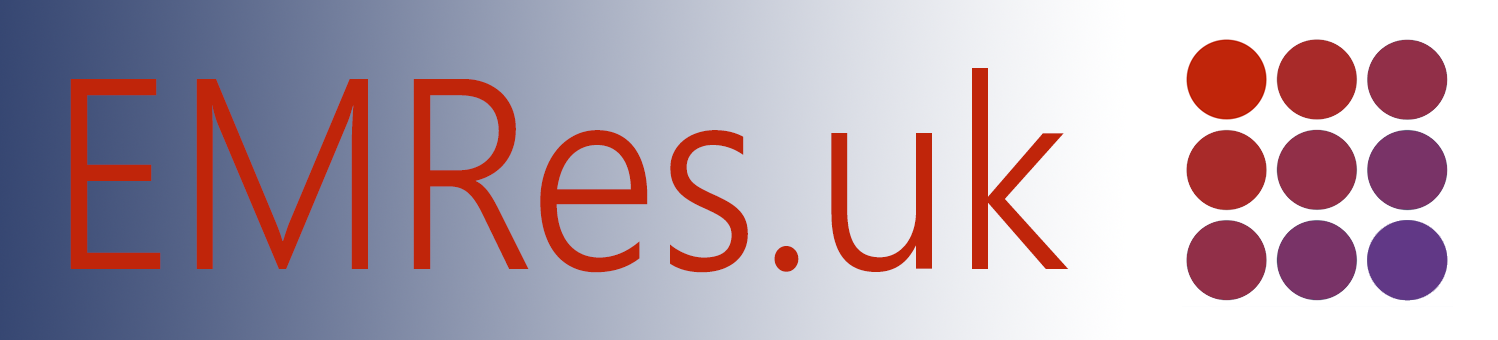
<style>
.page{position:relative;width:1498px;height:340px}
.page>*{position:absolute;margin:0}
.t1{font:271.1px "NirmalaUI-Semilight";color:#c0250a;scale:0.92 1}
</style>
<div class="page">
<p class="t1" style="left:70px;top:68px;width:999px;height:205px">EMRes.uk</p>
</div>
